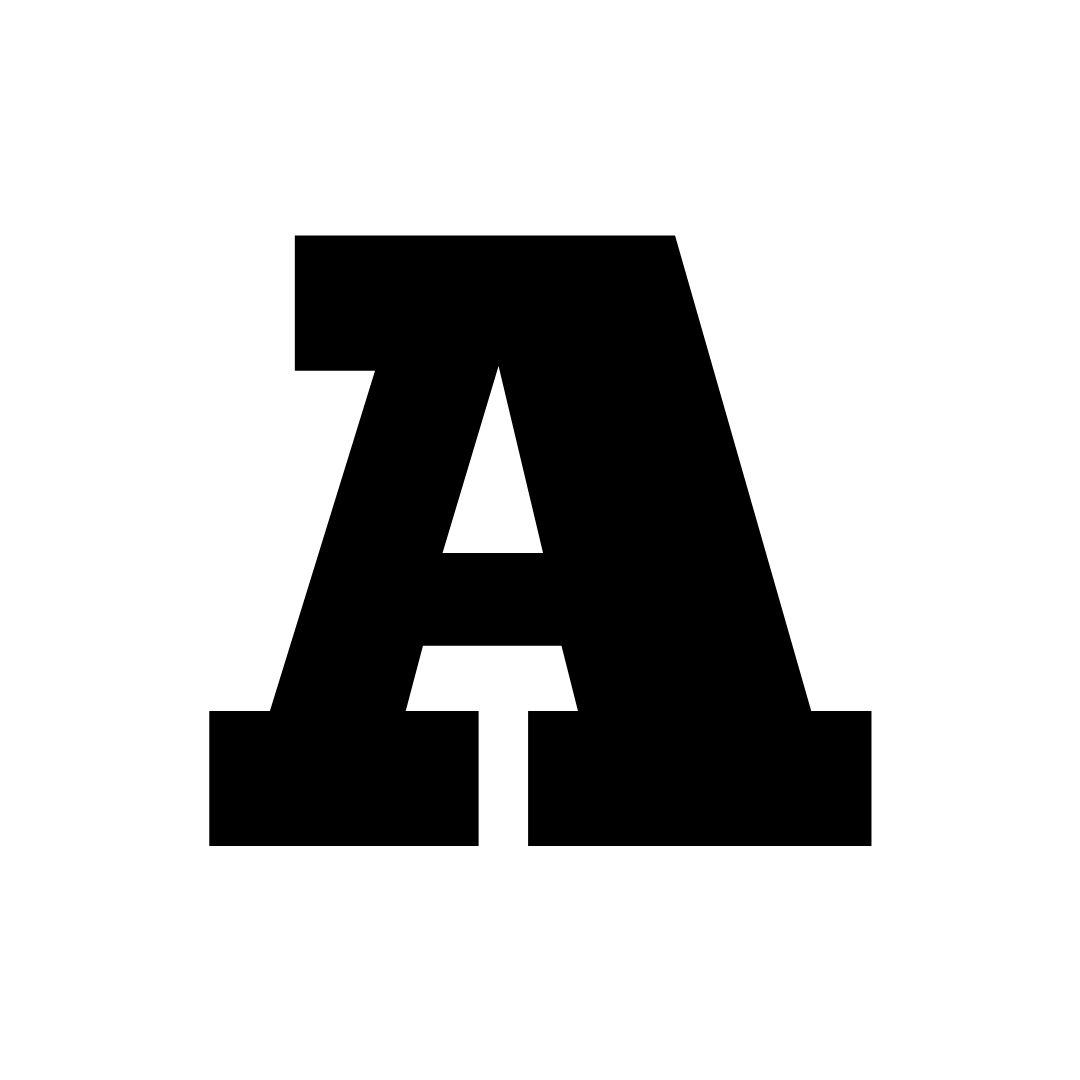
<style>
.page{position:relative;width:1080px;height:1080px;background:#ffffff}
.page>*{position:absolute;margin:0}
.t1{font:785.7px "Angkor-Regular";color:#000000}
</style>
<div class="page">
<p class="t1" style="left:209px;top:235px;width:663px;height:611px">A</p>
</div>
